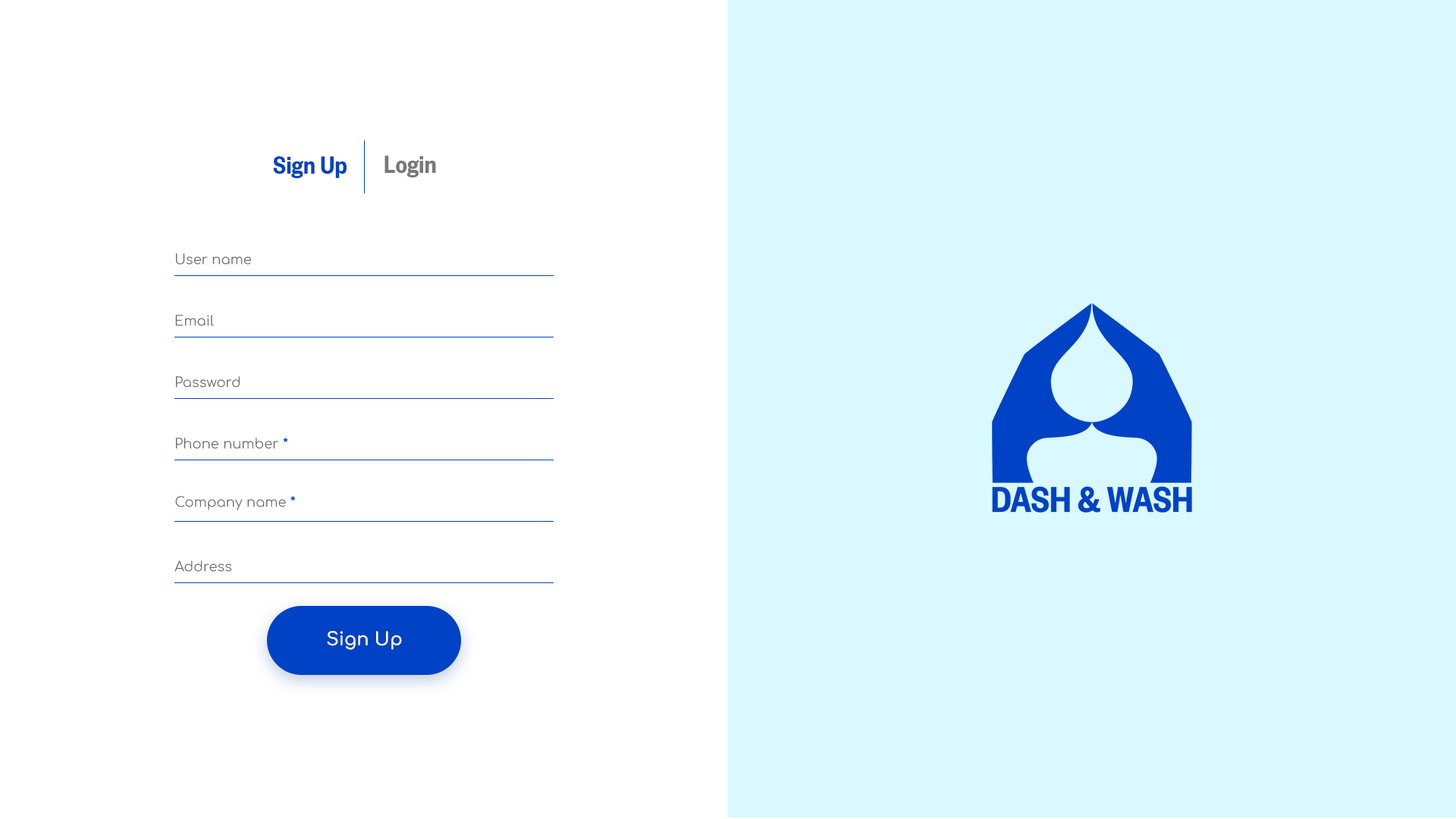
<style>
.page{position:relative;width:1456px;height:819px;background:#d9f8ff}
.page>*{position:absolute;margin:0}
.t1{font:27.3px "FoundersGroteskCondensed-Semibold";color:#0042c5}
.t2{font:27.3px "FoundersGroteskCondensed-Semibold";color:#797979}
.t3{font:13.6px "Comfortaa-Regular";color:#6c6c6c}
.t4{font:13.6px "Comfortaa-Bold";color:#0042c5}
.t5{font:18.2px "Comfortaa-Bold";color:#ffffff}
</style>
<div class="page">
<p class="t1" style="left:273px;top:156px;width:74px;height:22px">Sign Up</p>
<p class="t2" style="left:384px;top:155px;width:52px;height:22px">Login</p>
<p class="t3" style="left:176px;top:253px;width:75px;height:12px">User name</p>
<p class="t3" style="left:175px;top:315px;width:39px;height:11px">Email</p>
<p class="t3" style="left:176px;top:376px;width:64px;height:12px">Password</p>
<p class="t3" style="left:176px;top:438px;width:112px;height:11px">Phone number <span class="t4">*</span></p>
<p class="t3" style="left:175px;top:496px;width:120px;height:14px">Company name <span class="t4">*</span></p>
<p class="t3" style="left:174px;top:560px;width:58px;height:12px">Address</p>
<p class="t5" style="left:327px;top:631px;width:75px;height:19px">Sign Up</p>
</div>
